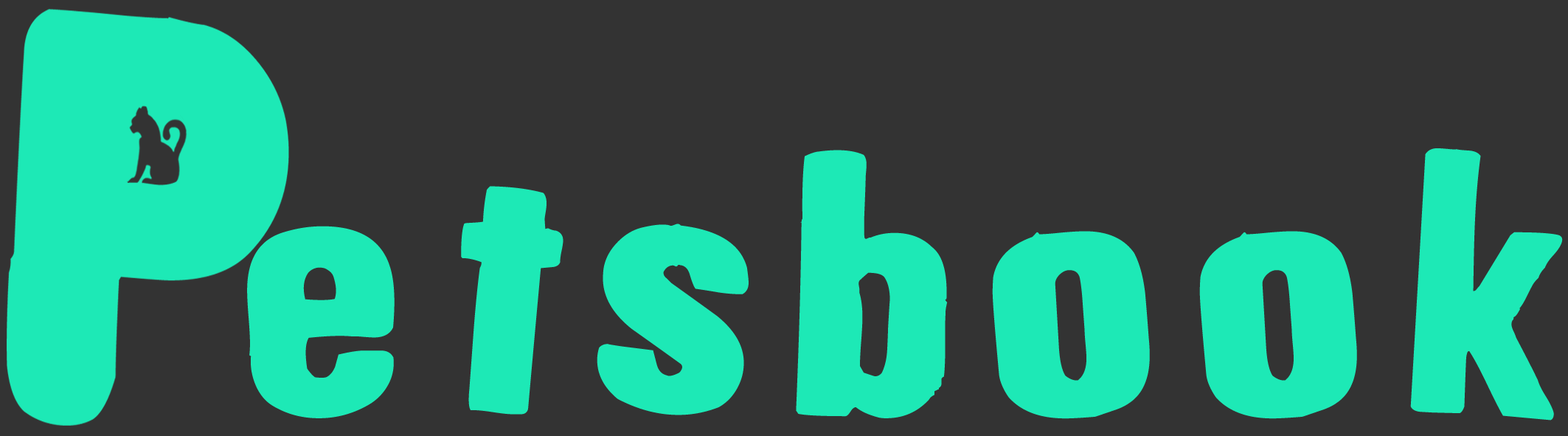
<style>
.page{position:relative;width:1568px;height:436px;background:#333333}
.page>*{position:absolute;margin:0}
.t1{font:333.4px "AlphaFridgeMagnets";letter-spacing:0.12em;color:#1de9b6;scale:0.95 1}
</style>
<div class="page">
<p class="t1" style="left:247px;top:148px;width:1316px;height:272px">etsbook</p>
</div>
